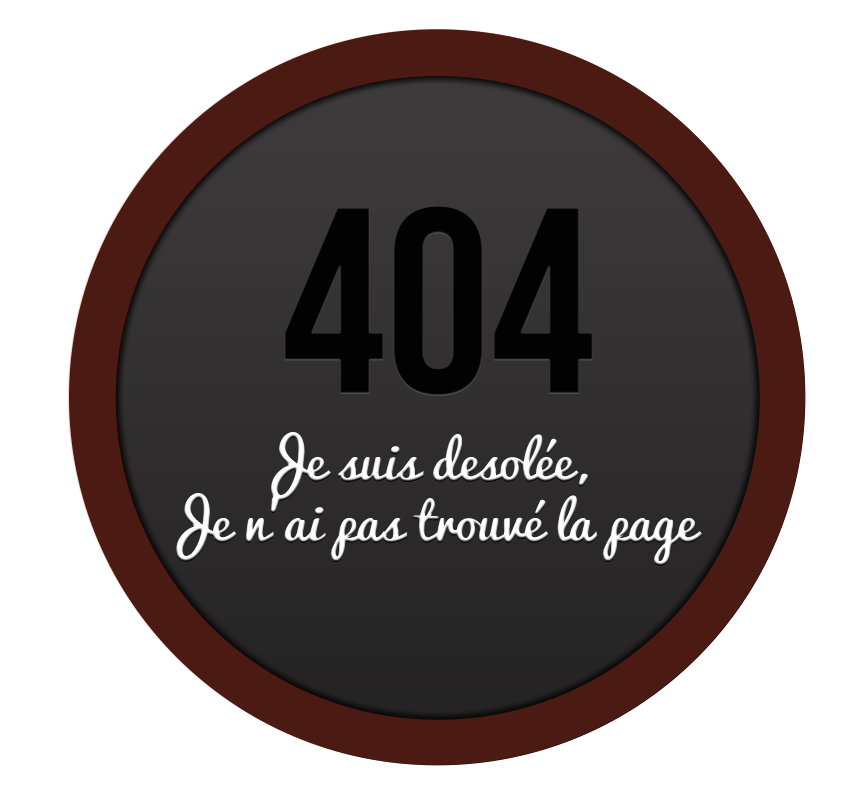
<style>
.page{position:relative;width:860px;height:800px;background:#ffffff}
.page>*{position:absolute;margin:0}
.t1{font:264.3px "BebasNeue";color:#0e0e0e}
.t2{font:51px "Pacifico";color:#ffffff}
</style>
<div class="page">
<p class="t1" style="left:284px;top:206px;width:309px;height:190px">404</p>
<p class="t2" style="left:176px;top:432px;width:527px;height:134px;text-align:center">Je suis desolée, <br>Je n’ai pas trouvé la page</p>
</div>
